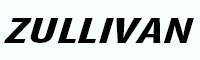
<style>
.page{position:relative;width:200px;height:60px;background:#f9ffff}
.page>*{position:absolute;margin:0}
.t1{font:36.8px "MyriadPro-BoldCondIt";color:#000000;scale:1.6 1}
</style>
<div class="page">
<p class="t1" style="left:4px;top:18px;width:190px;height:25px">ZULLIVAN</p>
</div>
